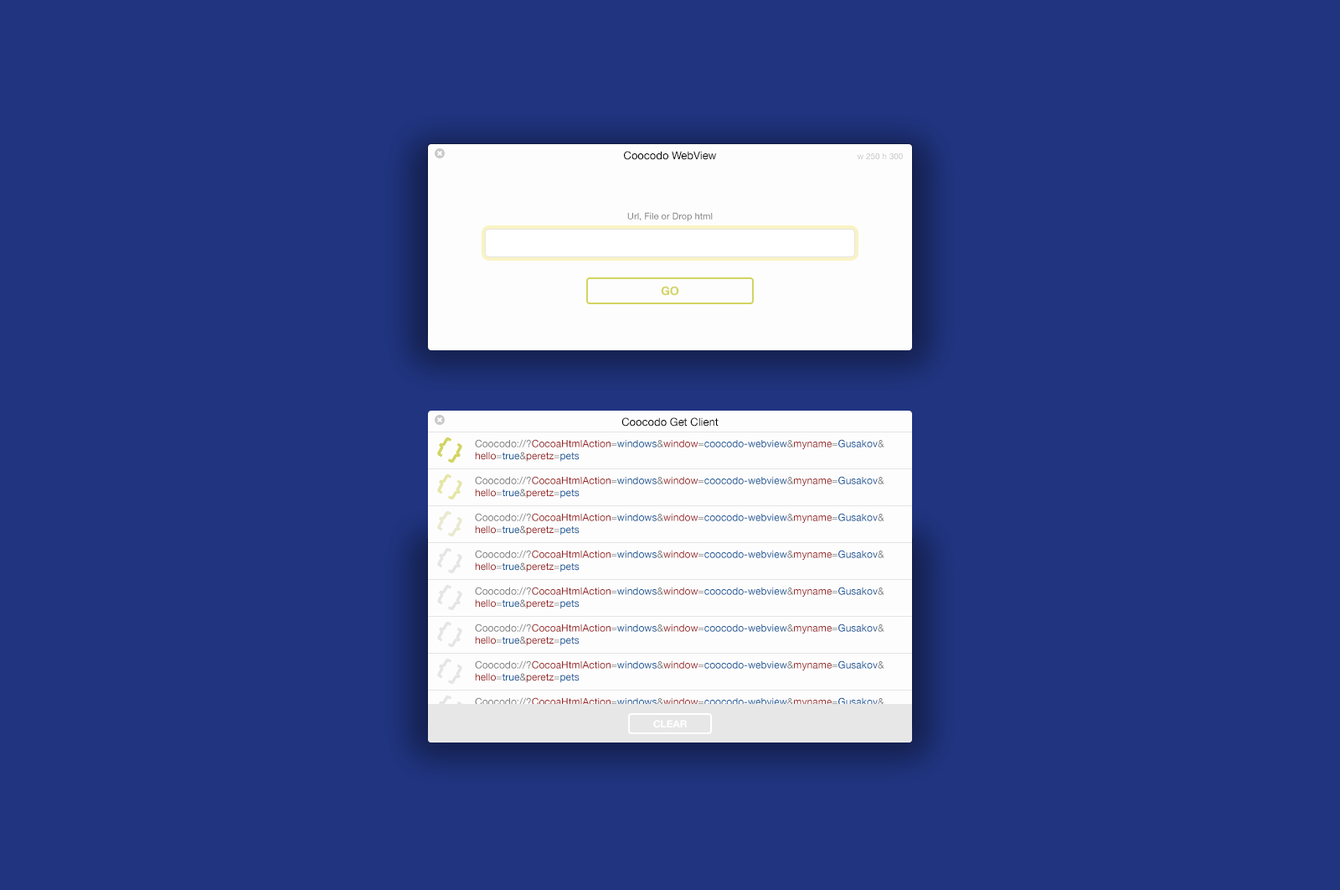
<style>
.page{position:relative;width:1340px;height:890px;background:#203480}
.page>*{position:absolute;margin:0}
.t1{font:10.9px "HelveticaNeue";color:#000000}
.t2{font:8.4px "HelveticaNeue";color:#c9c9c9}
.t3{font:9.2px "HelveticaNeue";color:#808080}
.t4{font:11.7px "HelveticaNeue-Bold";color:#d2d461;text-transform:uppercase}
.t5{font:10.1px "HelveticaNeue";color:#9a2626}
.t6{font:10.1px "HelveticaNeue";color:#808080}
.t7{font:10.1px "HelveticaNeue";color:#0c5496}
.t8{font:10.1px "HelveticaNeue"}
.t9{font:10.1px "HelveticaNeue-Bold";color:#ffffff;text-transform:uppercase}
</style>
<div class="page">
<p class="t1" style="left:624px;top:151px;width:93px;height:9px">Coocodo WebView</p>
<p class="t2" style="left:857px;top:152px;width:46px;height:7px">w 250 h 300</p>
<p class="t3" style="left:627px;top:212px;width:86px;height:9px">Url, File or Drop html</p>
<p class="t4" style="left:661px;top:286px;width:18px;height:10px">Go</p>
<p class="t1" style="left:622px;top:417px;width:97px;height:9px">Coocodo Get Client</p>
<p class="t5" style="left:475px;top:439px;width:410px;height:23px"><span class="t6">Coocodo://?</span>CocoaHtmlAction<span class="t6">=</span><span class="t7">windows</span><span class="t6">&amp;</span>window<span class="t6">=</span><span class="t7">coocodo-webview</span><span class="t6">&amp;</span>myname<span class="t6">=</span><span class="t7">Gusakov</span><span class="t6">&amp;<br></span>hello<span class="t6">=</span><span class="t7">true</span><span class="t6">&amp;</span>peretz<span class="t6">=</span><span class="t7">pets</span></p>
<p class="t5" style="left:475px;top:476px;width:410px;height:22px"><span class="t6">Coocodo://?</span>CocoaHtmlAction<span class="t6">=</span><span class="t7">windows</span><span class="t6">&amp;</span>window<span class="t6">=</span><span class="t7">coocodo-webview</span><span class="t6">&amp;</span>myname<span class="t6">=</span><span class="t7">Gusakov</span><span class="t6">&amp;<br></span>hello<span class="t6">=</span><span class="t7">true</span><span class="t6">&amp;</span>peretz<span class="t6">=</span><span class="t7">pets</span></p>
<p class="t5" style="left:475px;top:513px;width:410px;height:22px"><span class="t6">Coocodo://?</span>CocoaHtmlAction<span class="t6">=</span><span class="t7">windows</span><span class="t6">&amp;</span>window<span class="t6">=</span><span class="t7">coocodo-webview</span><span class="t6">&amp;</span>myname<span class="t6">=</span><span class="t7">Gusakov</span><span class="t6">&amp;<br></span>hello<span class="t6">=</span><span class="t7">true</span><span class="t6">&amp;</span>peretz<span class="t6">=</span><span class="t7">pets</span></p>
<p class="t5" style="left:475px;top:550px;width:410px;height:22px"><span class="t6">Coocodo://?</span>CocoaHtmlAction<span class="t6">=</span><span class="t7">windows</span><span class="t6">&amp;</span>window<span class="t6">=</span><span class="t7">coocodo-webview</span><span class="t6">&amp;</span>myname<span class="t6">=</span><span class="t7">Gusakov</span><span class="t6">&amp;<br></span>hello<span class="t6">=</span><span class="t7">true</span><span class="t6">&amp;</span>peretz<span class="t6">=</span><span class="t7">pets</span></p>
<p class="t5" style="left:475px;top:586px;width:410px;height:23px"><span class="t6">Coocodo://?</span>CocoaHtmlAction<span class="t6">=</span><span class="t7">windows</span><span class="t6">&amp;</span>window<span class="t6">=</span><span class="t7">coocodo-webview</span><span class="t6">&amp;</span>myname<span class="t6">=</span><span class="t7">Gusakov</span><span class="t6">&amp;<br></span>hello<span class="t6">=</span><span class="t7">true</span><span class="t6">&amp;</span>peretz<span class="t6">=</span><span class="t7">pets</span></p>
<p class="t5" style="left:475px;top:623px;width:410px;height:23px"><span class="t6">Coocodo://?</span>CocoaHtmlAction<span class="t6">=</span><span class="t7">windows</span><span class="t6">&amp;</span>window<span class="t6">=</span><span class="t7">coocodo-webview</span><span class="t6">&amp;</span>myname<span class="t6">=</span><span class="t7">Gusakov</span><span class="t6">&amp;<br></span>hello<span class="t6">=</span><span class="t7">true</span><span class="t6">&amp;</span>peretz<span class="t6">=</span><span class="t7">pets</span></p>
<p class="t5" style="left:475px;top:660px;width:410px;height:23px"><span class="t6">Coocodo://?</span>CocoaHtmlAction<span class="t6">=</span><span class="t7">windows</span><span class="t6">&amp;</span>window<span class="t6">=</span><span class="t7">coocodo-webview</span><span class="t6">&amp;</span>myname<span class="t6">=</span><span class="t7">Gusakov</span><span class="t6">&amp;<br></span>hello<span class="t6">=</span><span class="t7">true</span><span class="t6">&amp;</span>peretz<span class="t6">=</span><span class="t7">pets</span></p>
<p class="t8" style="left:475px;top:697px;width:410px;height:23px">Coocodo://?CocoaHtmlAction=windows&amp;window=coocodo-webview&amp;myname=Gusakov&amp;<br>hello=true&amp;peretz=pets</p>
<p class="t9" style="left:653px;top:720px;width:34px;height:8px">clear</p>
</div>
